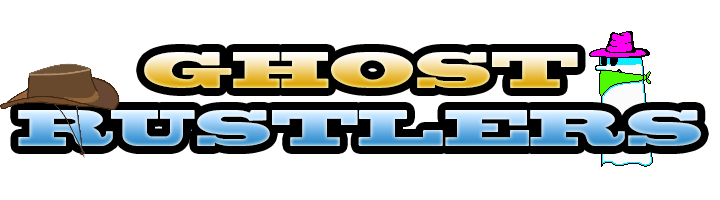
<style>
.page{position:relative;width:720px;height:200px;background:#ffffff}
.page>*{position:absolute;margin:0}
.t1{font:48px "BlackoakStd"}
</style>
<div class="page">
<p class="t1" style="left:18px;top:52px;width:683px;height:94px;text-align:center">GHOST<br>RUSTLERS</p>
</div>
